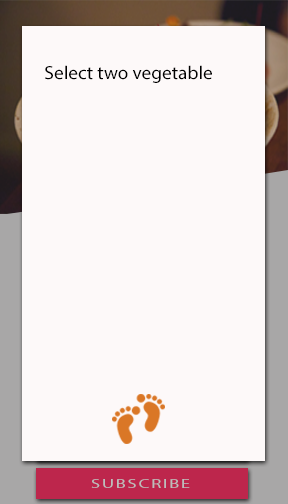
<style>
.page{position:relative;width:288px;height:504px;background:#fdf9f9}
.page>*{position:absolute;margin:0}
.t1{font:18.8px "MyriadPro-Regular";color:#000000}
.t2{font:12.9px "MyriadPro-Regular";letter-spacing:0.1em;color:#bdbdbd;scale:1.43 1}
</style>
<div class="page">
<p class="t1" style="left:45px;top:65px;width:167px;height:18px">Select two vegetable</p>
<p class="t2" style="left:91px;top:479px;width:99px;height:9px">SUBSCRIBE</p>
</div>
